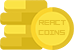
<style>
.page{position:relative;width:74px;height:50px}
.page>*{position:absolute;margin:0}
.t1{font:8.6px "FORCED-SQUARE";color:#e3c129}
</style>
<div class="page">
<p class="t1" style="left:38px;top:20px;width:28px;height:15px;text-align:center">REACT<br>COINS</p>
</div>
